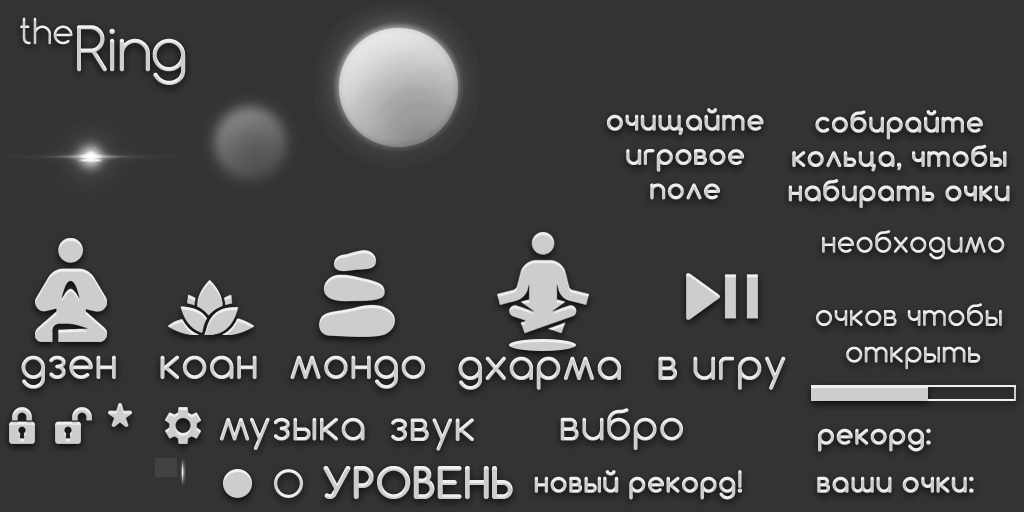
<style>
.page{position:relative;width:1024px;height:512px;background:#333333}
.page>*{position:absolute;margin:0}
.t1{font:33.3px "Comfortaa-Light";letter-spacing:-0.01em;font-weight:bold}
.t2{font:58.3px "Comfortaa-Light";letter-spacing:-0.05em;color:#cdcdcd;font-weight:bold}
.t3{font:58.3px "Comfortaa-Light";letter-spacing:-0.09em;color:#cdcdcd;font-weight:bold}
.t4{font:28.6px "Comfortaa-Bold";color:#dcdcdc;font-weight:bold}
.t5{font:28.6px "Comfortaa-Bold";font-weight:bold}
.t6{font:28.6px/18.3px "Comfortaa-Regular";font-weight:bold}
.t7{font:41.7px "Comfortaa-Regular";color:#dedede;font-weight:bold}
.t8{font:41.7px "Comfortaa-Regular";font-weight:bold}
.t9{font:40.7px "Comfortaa-Regular";font-weight:bold}
.t10{font:41.7px "Comfortaa-Bold";color:#cdcdcd;font-weight:bold}
</style>
<div class="page">
<p class="t1" style="left:20px;top:17px;width:53px;height:28px">the</p>
<p class="t2" style="left:77px;top:25px;width:109px;height:60px"><span class="t3">R</span>ing</p>
<p class="t4" style="left:607px;top:108px;width:157px;height:92px;text-align:center">очищайте<br>игровое<br>поле</p>
<p class="t5" style="left:788px;top:110px;width:222px;height:98px;text-align:center">собирайте<br>кольца, чтобы<br>набирать очки</p>
<p class="t6" style="left:816px;top:230px;width:189px;height:140px;text-align:center">необходимо<br><br><br><br>очков чтобы <br><br>открыть</p>
<p class="t7" style="left:21px;top:355px;width:95px;height:34px">дзен</p>
<p class="t8" style="left:160px;top:355px;width:97px;height:24px">коан</p>
<p class="t8" style="left:290px;top:355px;width:135px;height:34px">мондо</p>
<p class="t8" style="left:458px;top:356px;width:163px;height:34px">дхарма</p>
<p class="t8" style="left:658px;top:356px;width:128px;height:34px">в игру</p>
<p class="t9" style="left:560px;top:408px;width:123px;height:42px">вибро</p>
<p class="t9" style="left:220px;top:417px;width:145px;height:33px">музыка</p>
<p class="t9" style="left:391px;top:418px;width:83px;height:33px">звук</p>
<p class="t5" style="left:818px;top:428px;width:113px;height:24px">рекорд:</p>
<p class="t10" style="left:323px;top:466px;width:190px;height:33px">УРОВЕНЬ</p>
<p class="t5" style="left:534px;top:470px;width:208px;height:30px">новый рекорд!</p>
<p class="t5" style="left:817px;top:476px;width:157px;height:17px">ваши очки:</p>
</div>
